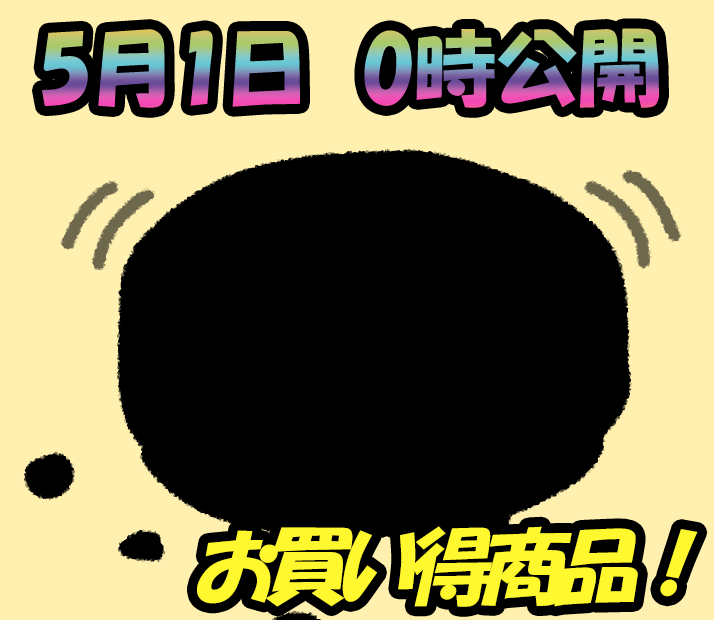
<style>
.page{position:relative;width:714px;height:620px;background:#000000}
.page>*{position:absolute;margin:0}
.t1{font:83px "HGPSoeiKakupoptai";letter-spacing:-0.013em}
.t2{font:83px "HGPSoeiKakupoptai";letter-spacing:-0.1em;color:#fff82e;font-style:italic}
</style>
<div class="page">
<p class="t1" style="left:42px;top:28px;width:617px;height:80px">5月1日　0時公開</p>
<p class="t2" style="left:197px;top:526px;width:501px;height:81px">お買い得商品！</p>
</div>
